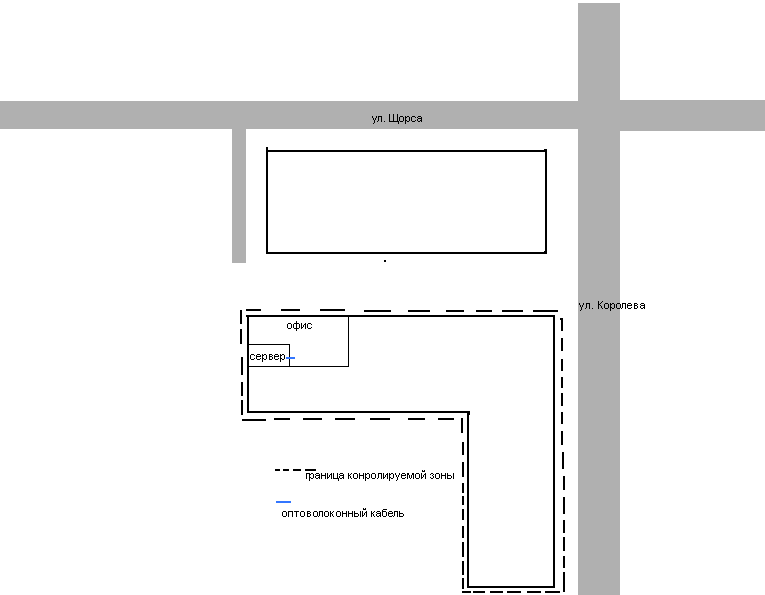
<style>
.page{position:relative;width:765px;height:595px;background:#ffffff}
.page>*{position:absolute;margin:0}
.t1{font:11px "ArialMT";color:#000000}
</style>
<div class="page">
<p class="t1" style="left:372px;top:114px;width:50px;height:10px">ул. Щорса</p>
<p class="t1" style="left:579px;top:301px;width:66px;height:10px">ул. Королева</p>
<p class="t1" style="left:287px;top:321px;width:25px;height:10px">офис</p>
<p class="t1" style="left:250px;top:354px;width:35px;height:8px">сервер</p>
<p class="t1" style="left:306px;top:470px;width:148px;height:11px">граница конролируемой зоны</p>
<p class="t1" style="left:282px;top:508px;width:122px;height:9px">оптоволоконный кабель</p>
</div>
